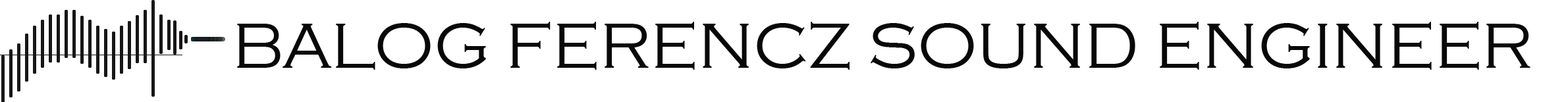
<style>
.page{position:relative;width:1568px;height:102px;background:#ffffff}
.page>*{position:absolute;margin:0}
.t1{font:65.9px "CopperplateGothic-Light";color:#080808}
</style>
<div class="page">
<p class="t1" style="left:237px;top:22px;width:1293px;height:48px">BALOG FERENCZ SOUND ENGINEER</p>
</div>
